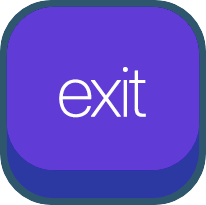
<style>
.page{position:relative;width:206px;height:205px;background:#613bd5}
.page>*{position:absolute;margin:0}
.t1{font:70.8px "SFProDisplay-Thin";letter-spacing:-0.04em;color:#ffffff;font-weight:bold}
</style>
<div class="page">
<p class="t1" style="left:59px;top:67px;width:87px;height:51px">exit</p>
</div>
